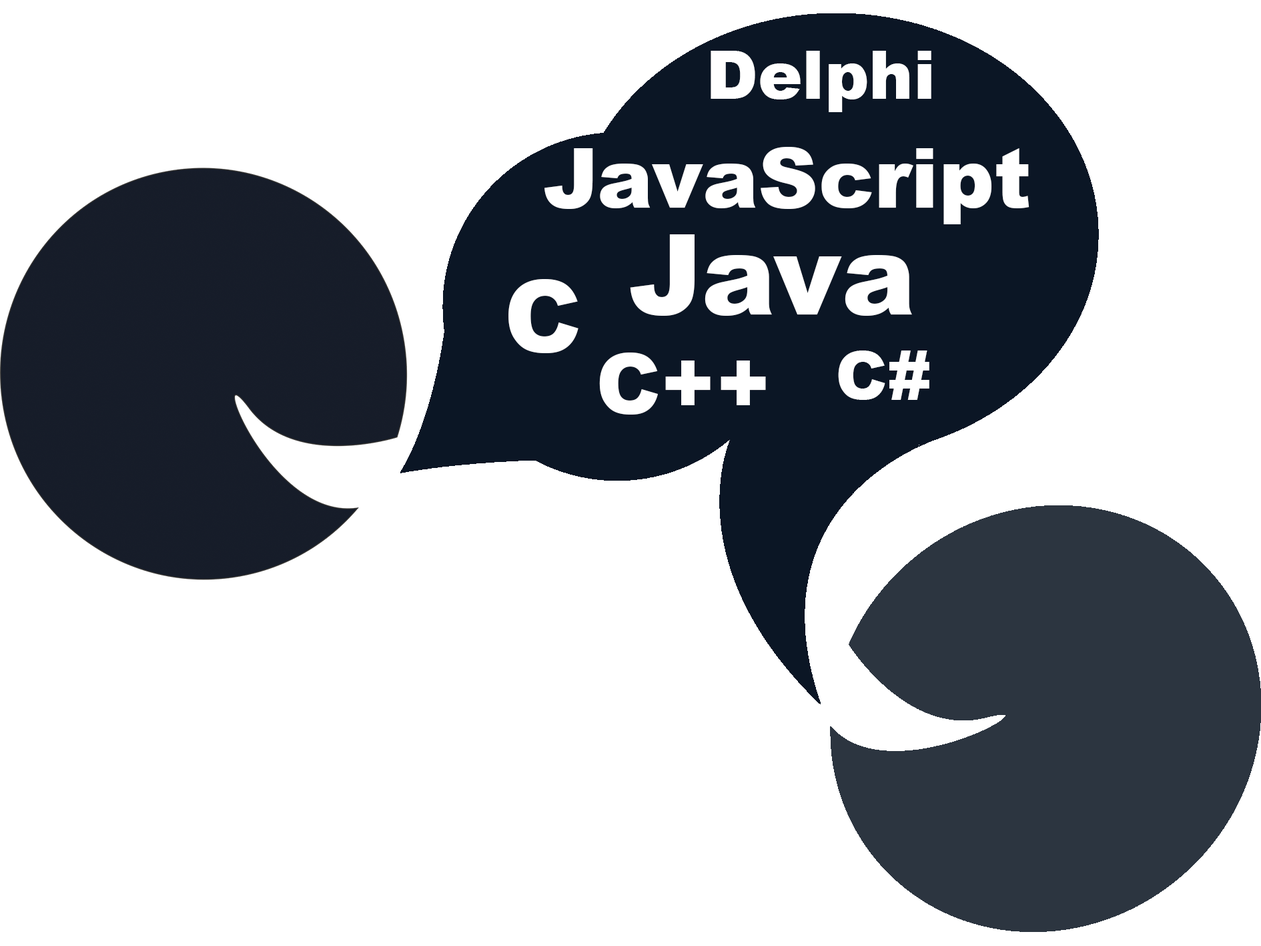
<style>
.page{position:relative;width:1261px;height:946px;background:#ffffff}
.page>*{position:absolute;margin:0}
.t1{font:66.7px "Arial-Black";color:#ffffff}
.t2{font:83.4px "Arial-Black";color:#ffffff}
.t3{font:111.2px "Arial-Black";color:#ffffff}
.t4{font:100.1px "Arial-Black";color:#ffffff}
</style>
<div class="page">
<p class="t1" style="left:711px;top:51px;width:221px;height:61px">Delphi</p>
<p class="t2" style="left:544px;top:147px;width:486px;height:77px">JavaScript</p>
<p class="t3" style="left:630px;top:234px;width:282px;height:82px">Java</p>
<p class="t4" style="left:508px;top:279px;width:71px;height:74px">C</p>
<p class="t2" style="left:599px;top:352px;width:167px;height:62px">C++</p>
<p class="t1" style="left:838px;top:350px;width:92px;height:50px">C#</p>
</div>
